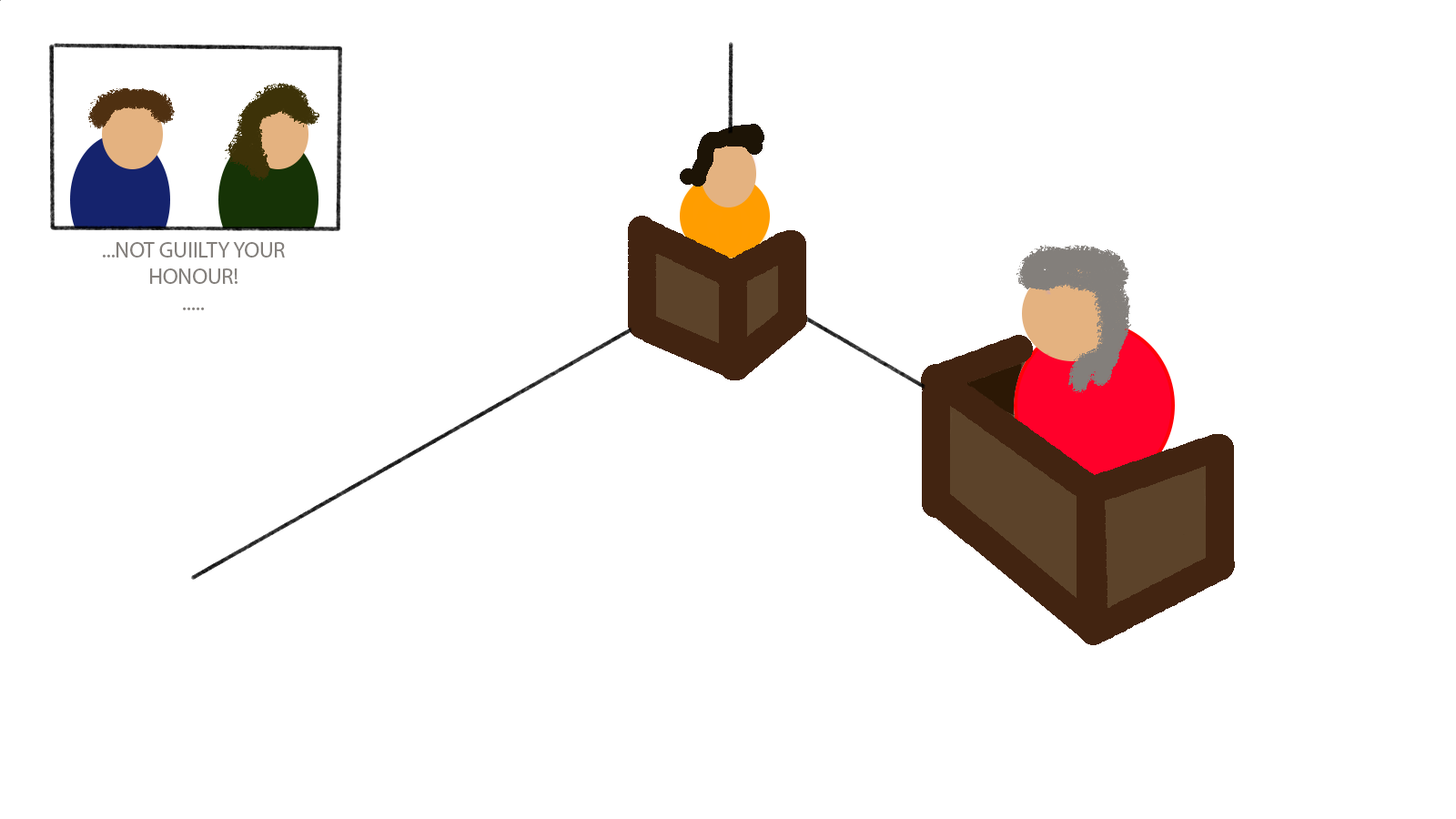
<style>
.page{position:relative;width:1456px;height:819px;background:#ffffff}
.page>*{position:absolute;margin:0}
.t1{font:21.8px "MyriadPro-Regular";color:#837f7b}
</style>
<div class="page">
<p class="t1" style="left:102px;top:242px;width:183px;height:68px;text-align:center">...NOT GUIILTY YOUR HONOUR!<br>.....</p>
</div>
